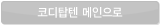
<style>
.page{position:relative;width:160px;height:25px;background:#bdbdbd}
.page>*{position:absolute;margin:0}
.t1{font:12.1px "YDIYGO330";color:#ffffff;scale:0.91 1}
</style>
<div class="page">
<p class="t1" style="left:37px;top:7px;width:86px;height:11px">코디탑텐 메인으로</p>
</div>
